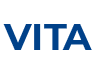
<style>
.page{position:relative;width:98px;height:78px;background:#ffffff}
.page>*{position:absolute;margin:0}
.t1{font:37px "Montserrat-Bold";color:#004189}
</style>
<div class="page">
<p class="t1" style="left:3px;top:24px;width:64px;height:26px">VIT</p>
<p class="t1" style="left:62px;top:24px;width:30px;height:26px">A</p>
</div>
